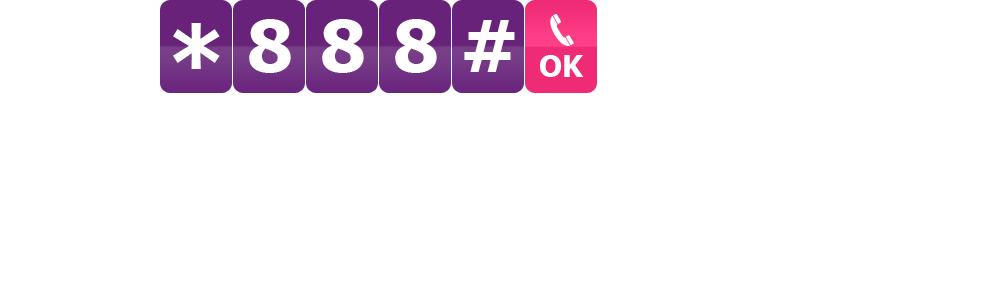
<style>
.page{position:relative;width:1000px;height:292px;background:#ffffff}
.page>*{position:absolute;margin:0}
.t1{font:95.4px "Tahoma-Bold";color:#ffffff}
.t2{font:72px "Tahoma-Bold";color:#ffffff}
.t3{font:30px "Tahoma-Bold";color:#ffffff}
</style>
<div class="page">
<p class="t1" style="left:173px;top:23px;width:47px;height:46px">*</p>
<p class="t2" style="left:249px;top:19px;width:42px;height:54px">8</p>
<p class="t2" style="left:322px;top:19px;width:42px;height:54px">8</p>
<p class="t2" style="left:395px;top:19px;width:42px;height:54px">8</p>
<p class="t2" style="left:464px;top:20px;width:51px;height:52px">#</p>
<p class="t3" style="left:540px;top:55px;width:44px;height:22px">OK</p>
</div>
